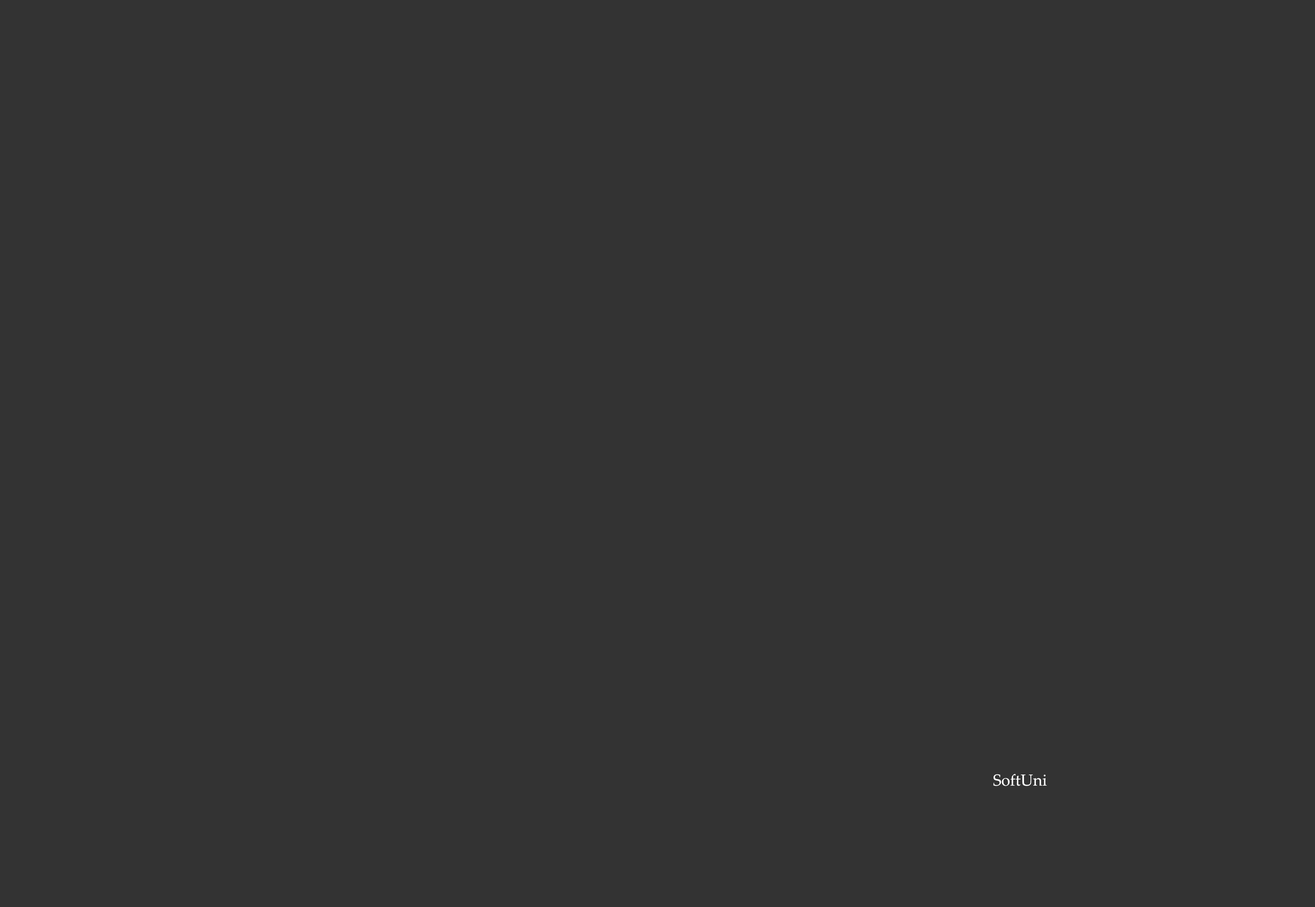
<style>
.page{position:relative;width:1315px;height:907px;background:#333333}
.page>*{position:absolute;margin:0}
.t1{font:16px "PalatinoLinotype-Roman";color:#ffffff}
</style>
<div class="page">
<p class="t1" style="left:993px;top:774px;width:54px;height:12px">SoftUni</p>
</div>
